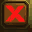
<style>
.page{position:relative;width:32px;height:32px}
.page>*{position:absolute;margin:0}
.t1{font:21.6px "28DaysLater";letter-spacing:-0.02em;color:#ff1313;scale:1.41 1}
</style>
<div class="page">
<p class="t1" style="left:5px;top:5px;width:21px;height:17px">X</p>
</div>
